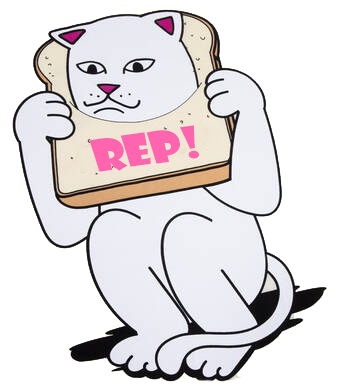
<style>
.page{position:relative;width:338px;height:391px;background:#ffffff}
.page>*{position:absolute;margin:0}
.t1{font:43px "ShowcardGothic-Reg";letter-spacing:-0.005em;color:#ff64ae;scale:1.1 1}
</style>
<div class="page">
<p class="t1" style="left:89px;top:125px;width:110px;height:47px;rotate:-8deg">rep!</p>
</div>
